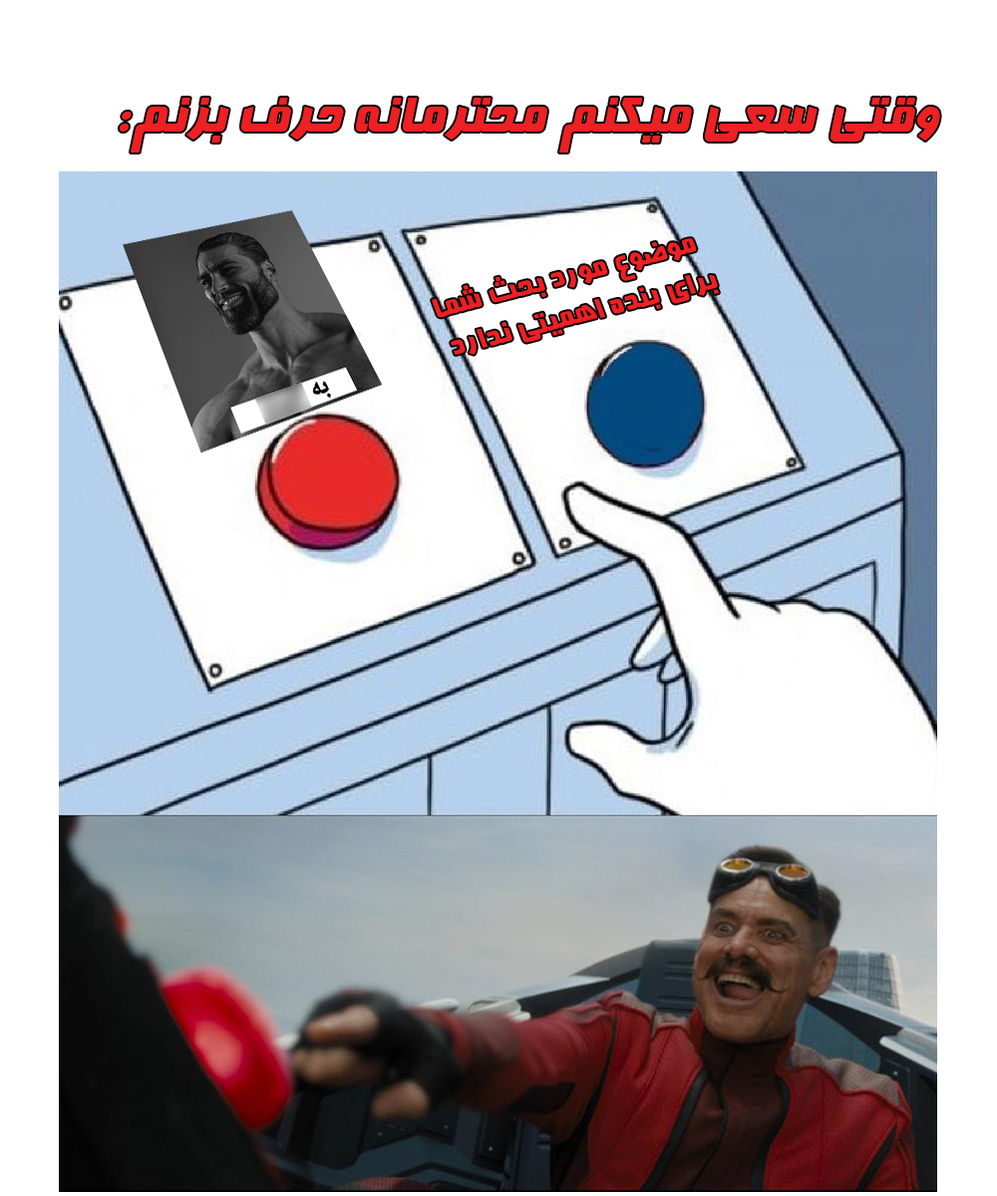
<style>
.page{position:relative;width:997px;height:1196px;background:#ffffff}
.page>*{position:absolute;margin:0}
.t1{font:59.8px "Far.Farnaz";color:#ed2024}
.t2{font:35.1px "Far.Farnaz";color:#ed2024;scale:0.95 1}
</style>
<div class="page">
<p class="t1" style="left:120px;top:98px;width:820px;height:55px">وقتی سعی میکنم محترمانه حرف بزنم:</p>
<p class="t2" style="left:432px;top:238px;width:287px;height:117px;text-align:center;rotate:-14deg">موضوع مورد بحث شما<br> برای بنده اهمیتی ندارد</p>
</div>
